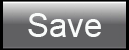
<style>
.page{position:relative;width:129px;height:50px;background:#606062}
.page>*{position:absolute;margin:0}
.t1{font:33px "ArialMT";color:#f9fbfa}
</style>
<div class="page">
<p class="t1" style="left:28px;top:13px;width:73px;height:24px">Save</p>
</div>
